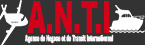
<style>
.page{position:relative;width:145px;height:45px;background:#333333}
.page>*{position:absolute;margin:0}
.t1{font:45px "Arial-Black";color:#d2021b;scale:0.52 1}
.t2{font:8.3px "Arial-Black";color:#f9f5f6;font-weight:bold;scale:0.39 1}
</style>
<div class="page">
<p class="t1" style="left:27px;top:1px;width:83px;height:32px">A.N.T.I</p>
<p class="t2" style="left:25px;top:34px;width:89px;height:10px">Agence de Negoce et de Transit Internationnal</p>
</div>
